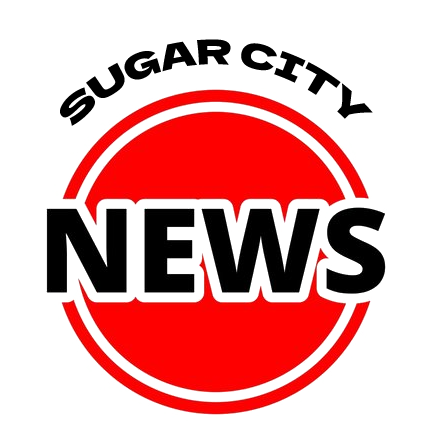
<style>
.page{position:relative;width:432px;height:432px;background:#ffffff}
.page>*{position:absolute;margin:0}
.t1{font:34px "DelaGothicOne-Regular";color:#000000}
</style>
<div class="page">
<p class="t1" style="left:59px;top:39px;width:314px;height:87px">SUGAR CITY</p>
</div>
